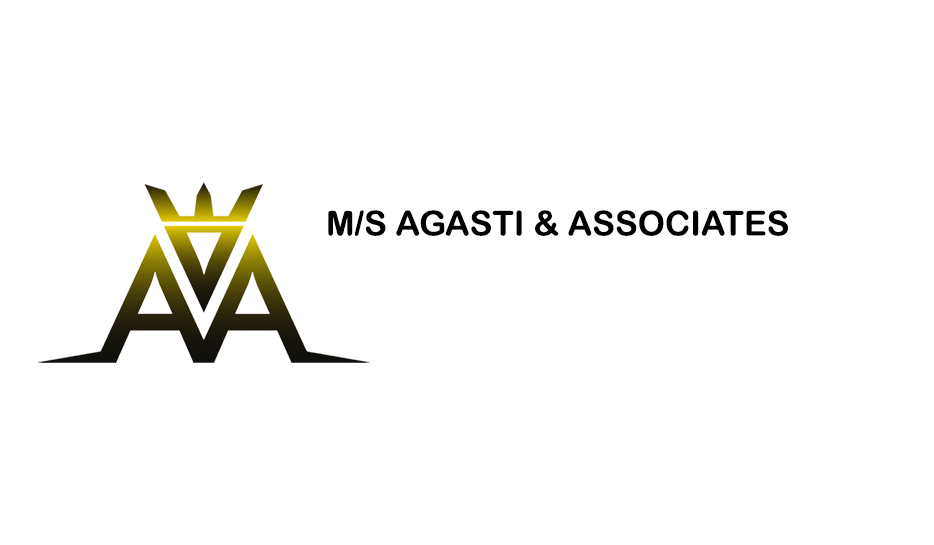
<style>
.page{position:relative;width:934px;height:545px;background:#ffffff}
.page>*{position:absolute;margin:0}
.t1{font:34.2px "ArialRoundedMTBold";color:#000000}
</style>
<div class="page">
<p class="t1" style="left:328px;top:210px;width:460px;height:26px">M/S AGASTI &amp; ASSOCIATES</p>
</div>
